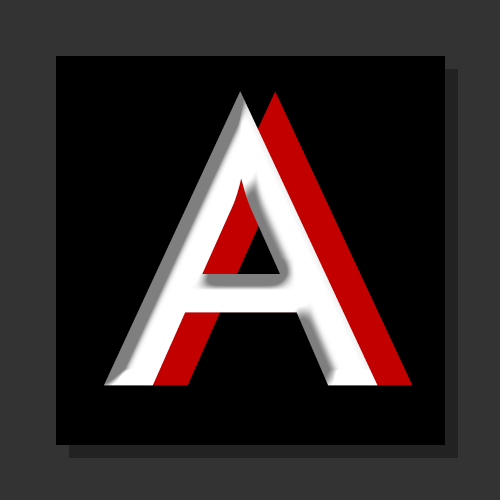
<style>
.page{position:relative;width:500px;height:500px;background:#000000}
.page>*{position:absolute;margin:0}
.t1{font:456.1px "Futura-Normal";color:#ffffff}
</style>
<div class="page">
<p class="t1" style="left:104px;top:91px;width:274px;height:295px">A</p>
</div>
